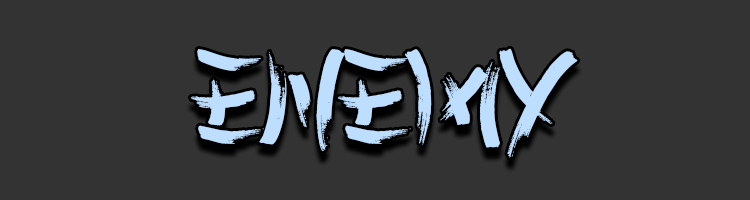
<style>
.page{position:relative;width:750px;height:200px;background:#333333}
.page>*{position:absolute;margin:0}
.t1{font:134.7px "ChineseTakeaway";color:#bddeff;scale:1.07 1}
</style>
<div class="page">
<p class="t1" style="left:190px;top:48px;width:388px;height:110px">Enemy</p>
</div>
